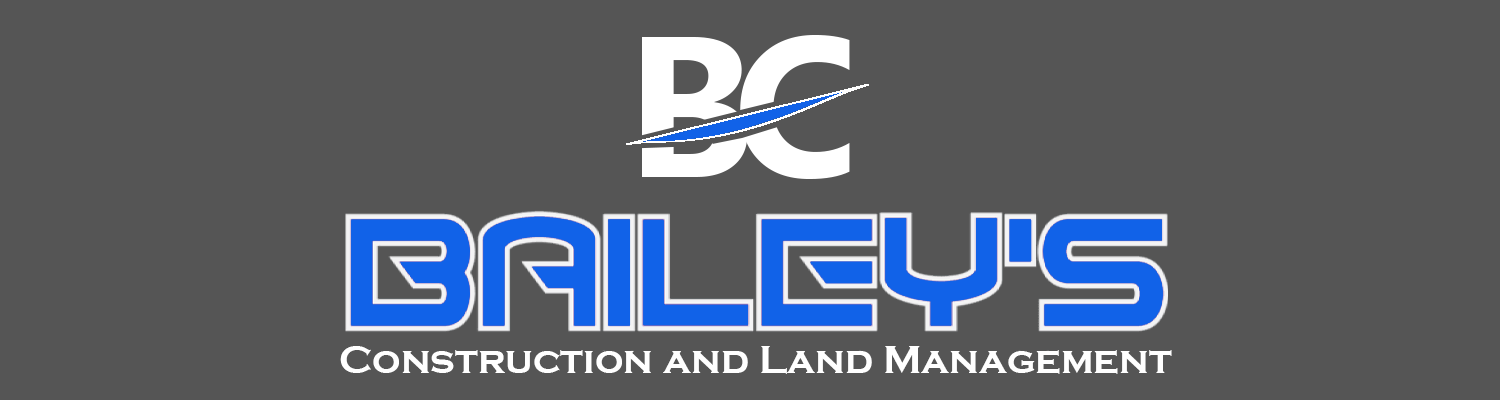
<style>
.page{position:relative;width:1500px;height:400px;background:#555555}
.page>*{position:absolute;margin:0}
.t1{font:40px "CopperplateGothic-Bold";color:#ffffff}
</style>
<div class="page">
<p class="t1" style="left:340px;top:346px;width:832px;height:28px">Construction and Land Management</p>
</div>
